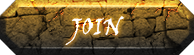
<style>
.page{position:relative;width:194px;height:55px}
.page>*{position:absolute;margin:0}
.t1{font:24px "VinerHandITC";color:#fefefe}
</style>
<div class="page">
<p class="t1" style="left:65px;top:16px;width:59px;height:29px">JOIN</p>
</div>
